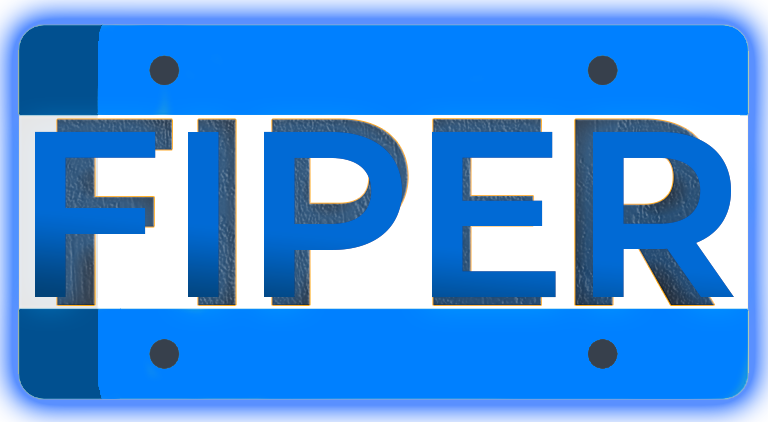
<style>
.page{position:relative;width:768px;height:422px;background:#0080ff}
.page>*{position:absolute;margin:0}
.t1{font:265.8px "Poppins-SemiBold"}
.t2{font:235.4px "Montserrat-SemiBold";color:#016ad5}
</style>
<div class="page">
<p class="t1" style="left:57px;top:119px;width:658px;height:186px">FIPER</p>
<p class="t2" style="left:35px;top:131px;width:699px;height:167px">FIPER</p>
</div>
